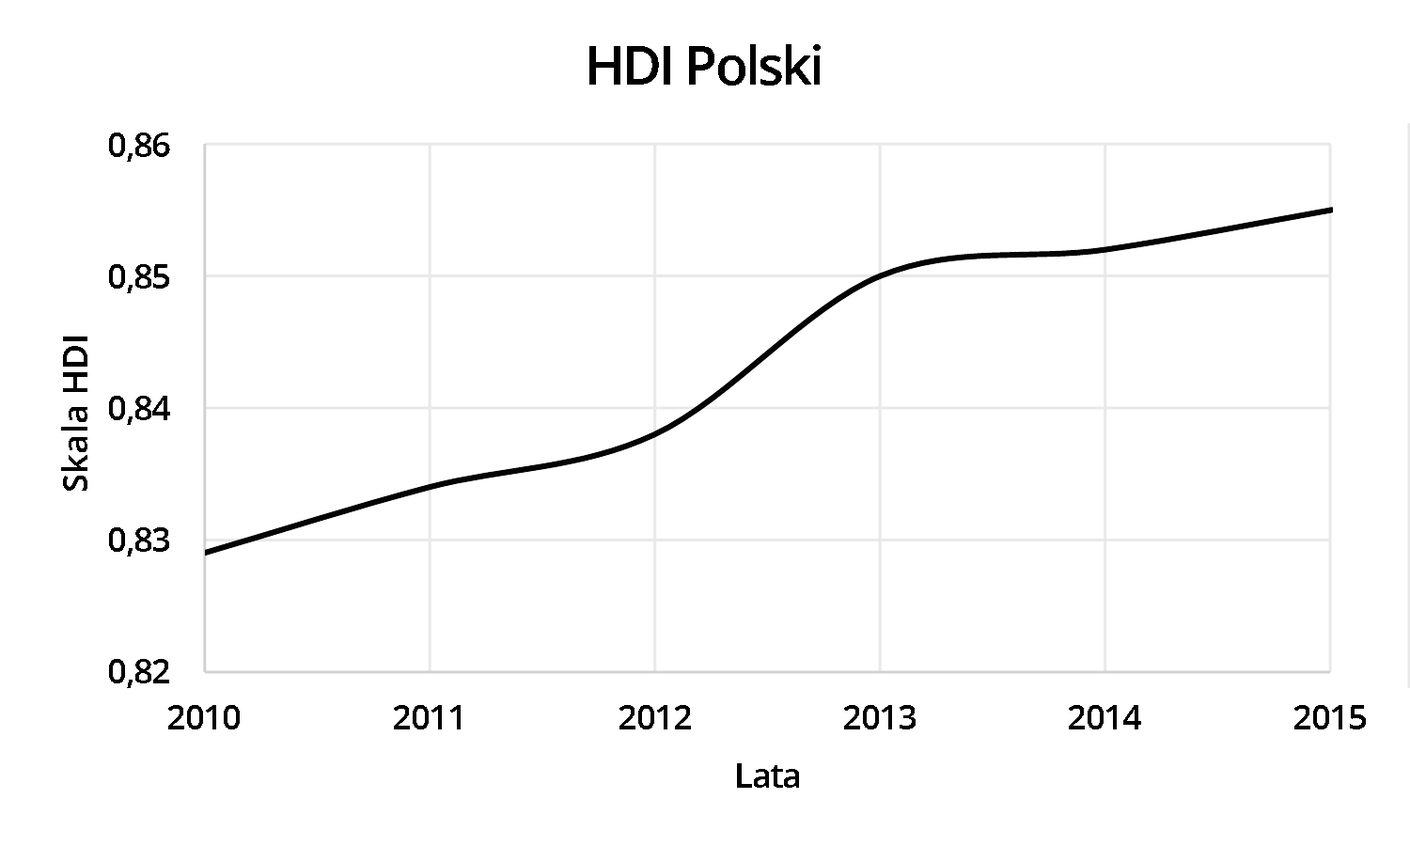
<style>
.page{position:relative;width:1410px;height:846px;background:#ffffff}
.page>*{position:absolute;margin:0}
.t1{font:54px "OpenSans-Semibold";letter-spacing:-0.05em;color:#000000}
.t2{font:35.1px "OpenSans-Semibold";letter-spacing:-0.05em;color:#000000}
.t3{font:35.1px "OpenSans-Semibold";letter-spacing:-0.01em;color:#000000}
</style>
<div class="page">
<p class="t1" style="left:589px;top:44px;width:231px;height:42px">HDI Polski</p>
<p class="t2" style="left:109px;top:133px;width:61px;height:29px">0,86</p>
<p class="t2" style="left:109px;top:264px;width:60px;height:29px">0,85</p>
<p class="t3" style="left:61px;top:336px;width:26px;height:155px;rotate:-90deg">Skala HDI</p>
<p class="t2" style="left:109px;top:396px;width:61px;height:29px">0,84</p>
<p class="t2" style="left:109px;top:527px;width:60px;height:29px">0,83</p>
<p class="t2" style="left:109px;top:659px;width:60px;height:29px">0,82</p>
<p class="t2" style="left:168px;top:705px;width:72px;height:24px">2010</p>
<p class="t2" style="left:394px;top:705px;width:67px;height:24px">2011</p>
<p class="t2" style="left:619px;top:705px;width:72px;height:24px">2012</p>
<p class="t2" style="left:844px;top:705px;width:71px;height:24px">2013</p>
<p class="t2" style="left:1069px;top:705px;width:72px;height:24px">2014</p>
<p class="t2" style="left:1294px;top:705px;width:72px;height:24px">2015</p>
<p class="t2" style="left:737px;top:763px;width:62px;height:25px">Lata</p>
</div>
